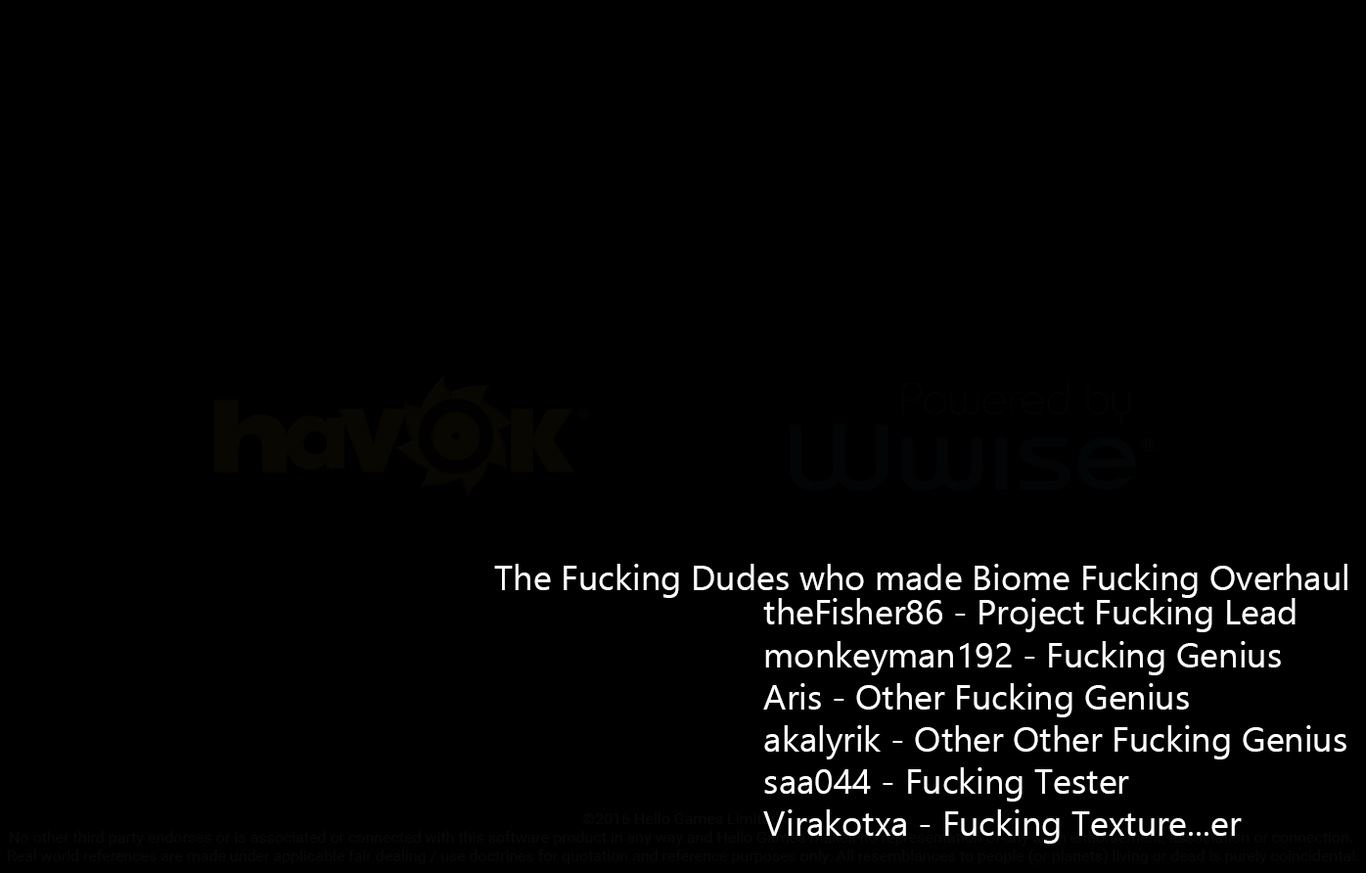
<style>
.page{position:relative;width:1366px;height:873px;background:#000000}
.page>*{position:absolute;margin:0}
.t1{font:35.2px "Ebrima";color:#ffffff}
</style>
<div class="page">
<p class="t1" style="left:494px;top:564px;width:853px;height:34px">The Fucking Dudes who made Biome Fucking Overhaul</p>
<p class="t1" style="left:763px;top:598px;width:584px;height:246px">theFisher86 - Project Fucking Lead<br>monkeyman192 - Fucking Genius<br>Aris - Other Fucking Genius<br>akalyrik - Other Other Fucking Genius<br>saa044 - Fucking Tester<br>Virakotxa - Fucking Texture...er</p>
</div>
